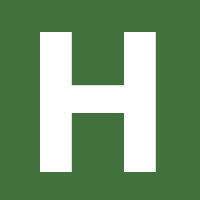
<style>
.page{position:relative;width:200px;height:200px;background:#42713e}
.page>*{position:absolute;margin:0}
.t1{font:208.3px "MyriadPro-Bold";color:#ffffff}
</style>
<div class="page">
<p class="t1" style="left:40px;top:32px;width:116px;height:140px">H</p>
</div>
